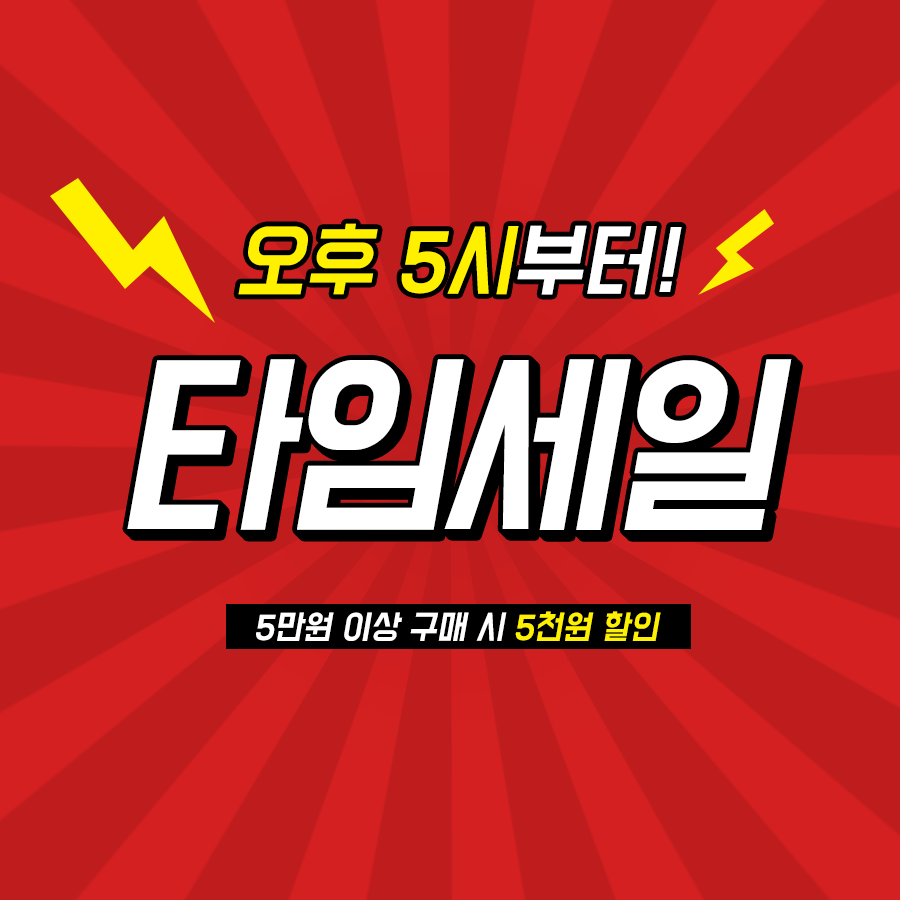
<style>
.page{position:relative;width:900px;height:900px;background:#bf1c1d}
.page>*{position:absolute;margin:0}
.t1{font:72px "BMDoHyeon";color:#fff000;font-style:italic}
.t2{font:72px "BMDoHyeon";color:#ffffff;font-style:italic}
.t3{font:180px "BMDoHyeon";letter-spacing:-0.05em;color:#ffffff;font-style:italic}
.t4{font:180px "BMDoHyeon";letter-spacing:-0.05em;font-style:italic}
.t5{font:30px "BMDoHyeon";color:#ffffff;font-style:italic}
.t6{font:30px "BMDoHyeon";color:#fef002;font-style:italic}
</style>
<div class="page">
<p class="t1" style="left:238px;top:223px;width:444px;height:72px">오후 5시<span class="t2">부터!</span></p>
<p class="t3" style="left:127px;top:359px;width:665px;height:171px">타임세일</p>
<p class="t3" style="left:128px;top:360px;width:665px;height:172px">타임세일</p>
<p class="t3" style="left:130px;top:361px;width:664px;height:172px">타임세일</p>
<p class="t3" style="left:131px;top:363px;width:665px;height:171px">타임세일</p>
<p class="t3" style="left:133px;top:364px;width:664px;height:172px">타임세일</p>
<p class="t4" style="left:134px;top:366px;width:664px;height:171px">타임세일</p>
<p class="t5" style="left:256px;top:611px;width:405px;height:30px">5만원 이상 구매 시 <span class="t6">5천원 할인</span></p>
</div>
